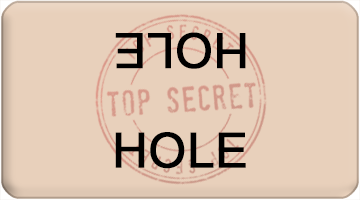
<style>
.page{position:relative;width:360px;height:200px;background:#e8d0bb}
.page>*{position:absolute;margin:0}
.t1{font:48px "ArialMT";color:#000000;font-weight:bold}
</style>
<div class="page">
<p class="t1" style="left:115px;top:32px;width:131px;height:37px;rotate:180deg">HOLE</p>
<p class="t1" style="left:115px;top:132px;width:131px;height:37px">HOLE</p>
</div>
